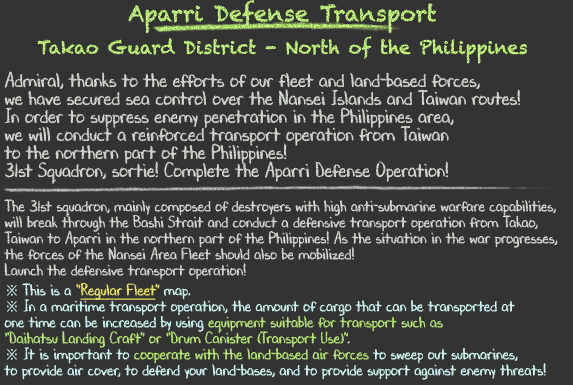
<style>
.page{position:relative;width:573px;height:385px;background:#333333}
.page>*{position:absolute;margin:0}
.t1{font:18px/36px "Chalkduster"}
.t2{font:22px/36px "Chalkduster"}
.t3{font:20px/18px "DJBChalkItUp";color:#d9ded6;scale:0.9 1}
.t4{font:16px/16px "DJBChalkItUp";color:#d9ded6;scale:0.9 1}
.t5{font:16px/20px "DJBChalkItUp";color:#d9ded6;scale:0.9 1}
.t6{font:16px/16px "TimesNewRomanPSMT";color:#d7feff;scale:0.9 1}
.t7{font:16px/16px "DJBChalkItUp";color:#d7feff;scale:0.9 1}
.t8{font:16px/16px "DJBChalkItUp";color:#f5ed68;scale:0.9 1}
.t9{font:16px/16px "DJBChalkItUp";color:#f5ed68;text-decoration:underline;scale:0.9 1}
.t10{font:16px/16px "DJBChalkItUp";color:#bdef78;scale:0.9 1}
</style>
<div class="page">
<p class="t1" style="left:37px;top:0px;width:490px;height:64px;text-align:center"><span class="t2">Aparri Defense Transport<br></span>Takao Guard District - North of the Philippines</p>
<p class="t3" style="left:4px;top:71px;width:554px;height:309px">Admiral, thanks to the efforts of our fleet and land-based forces,<br>we have secured sea control over the Nansei Islands and Taiwan routes!<br>In order to suppress enemy penetration in the Philippines area,<br>we will conduct a reinforced transport operation from Taiwan<br>to the northern part of the Philippines!<br>31st Squadron, sortie! Complete the Aparri Defense Operation!<br><br><span class="t4">The 31st squadron, mainly composed of destroyers with high anti-submarine warfare capabilities,<br>will break through the Bashi Strait and conduct a defensive transport operation from Takao,<br>Taiwan to Aparri in the northern part of the Philippines! As the situation in the war progresses,<br>the forces of the Nansei Area Fleet should also be mobilized!<br></span><span class="t5">Launch the defensive transport operation!<br></span><span class="t6">※ </span><span class="t7">This is a </span><span class="t8">"</span><span class="t9">Regular Fleet</span><span class="t8">"</span><span class="t7"> map.<br></span><span class="t6">※</span><span class="t7"> In a maritime transport operation, the amount of cargo that can be transported at<br>one time can be increased by using </span><span class="t10">equipment suitable for transport such as<br>“Daihatsu Landing Craft” or “Drum Canister (Transport Use)”</span><span class="t7">.<br></span><span class="t6">※</span><span class="t7"> It is important to </span><span class="t10">cooperate with the land-based air forces</span><span class="t7"> to sweep out submarines,<br>to provide air cover, to defend your land-bases, and to provide support against enemy threats!</span></p>
</div>
